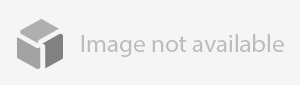
<style>
.page{position:relative;width:300px;height:85px;background:#f5f5f5}
.page>*{position:absolute;margin:0}
.t1{font:25px "MyriadPro-Regular";color:#bcbcbc}
</style>
<div class="page">
<p class="t1" style="left:81px;top:34px;width:203px;height:23px">Image not available</p>
</div>
